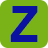
<style>
.page{position:relative;width:48px;height:48px;background:#7ab317}
.page>*{position:absolute;margin:0}
.t1{font:72px "FranklinGothic-Medium";color:#0b12a1}
</style>
<div class="page">
<p class="t1" style="left:10px;top:6px;width:28px;height:36px">z</p>
</div>
